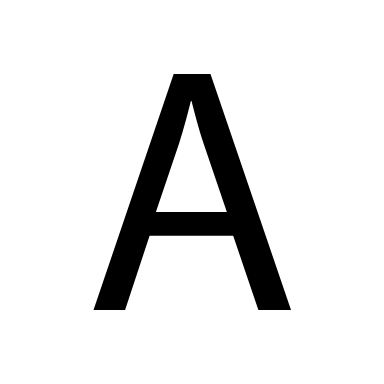
<style>
.page{position:relative;width:384px;height:384px;background:#ffffff}
.page>*{position:absolute;margin:0}
.t1{font:350px "MyriadPro-Regular";color:#000000}
</style>
<div class="page">
<p class="t1" style="left:93px;top:74px;width:198px;height:236px">A</p>
</div>
